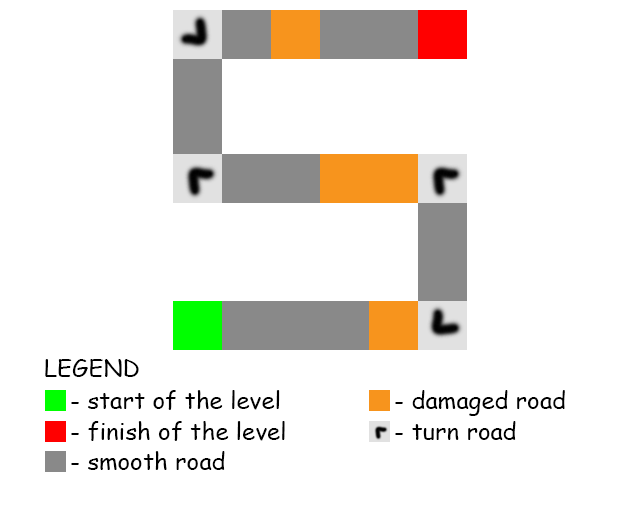
<style>
.page{position:relative;width:640px;height:512px;background:#ffffff}
.page>*{position:absolute;margin:0}
.t1{font:24px "ComicSansMS";color:#000000}
</style>
<div class="page">
<p class="t1" style="left:45px;top:359px;width:94px;height:18px">LEGEND</p>
<p class="t1" style="left:71px;top:390px;width:209px;height:20px">- start of the level</p>
<p class="t1" style="left:395px;top:390px;width:170px;height:26px">- damaged road</p>
<p class="t1" style="left:71px;top:421px;width:214px;height:20px">- finish of the level</p>
<p class="t1" style="left:395px;top:421px;width:121px;height:19px">- turn road</p>
<p class="t1" style="left:71px;top:451px;width:154px;height:19px">- smooth road</p>
</div>
